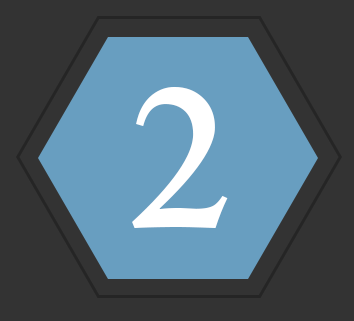
<style>
.page{position:relative;width:354px;height:321px;background:#333333}
.page>*{position:absolute;margin:0}
.t1{font:280px "Rod";color:#ffffff}
</style>
<div class="page">
<p class="t1" style="left:132px;top:86px;width:96px;height:142px">2</p>
</div>
